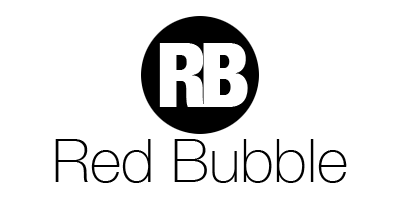
<style>
.page{position:relative;width:400px;height:200px;background:#ffffff}
.page>*{position:absolute;margin:0}
.t1{font:60px "HelveticaNeue-Thin";color:#000000}
</style>
<div class="page">
<p class="t1" style="left:55px;top:139px;width:292px;height:44px">Red Bubble</p>
</div>
